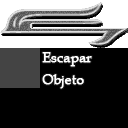
<style>
.page{position:relative;width:128px;height:128px;background:#000000}
.page>*{position:absolute;margin:0}
.t1{font:14.4px/21.3px "BookAntiqua";color:#ffffff;font-weight:bold;scale:0.94 1}
</style>
<div class="page">
<p class="t1" style="left:42px;top:52px;width:50px;height:37px">Escapar<br>Objeto</p>
</div>
